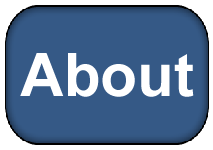
<style>
.page{position:relative;width:213px;height:150px;background:#355986}
.page>*{position:absolute;margin:0}
.t1{font:60px "Arial-BoldMT";color:#ffffff}
</style>
<div class="page">
<p class="t1" style="left:20px;top:53px;width:174px;height:44px">About</p>
</div>
